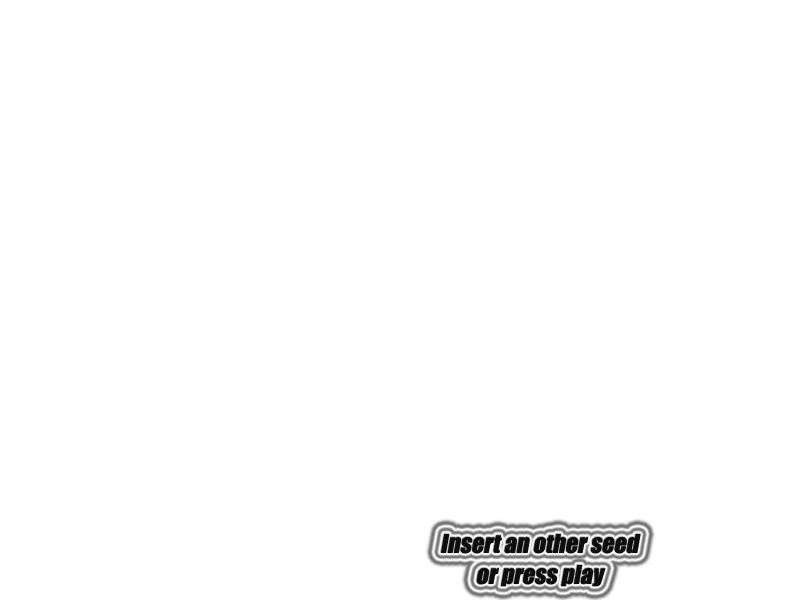
<style>
.page{position:relative;width:800px;height:600px;background:#ffffff}
.page>*{position:absolute;margin:0}
.t1{font:24px/31px "Impact";color:#000000;font-style:italic}
</style>
<div class="page">
<p class="t1" style="left:440px;top:534px;width:201px;height:53px;text-align:center;opacity:0.95">Insert an other seed <br>or press play</p>
</div>
